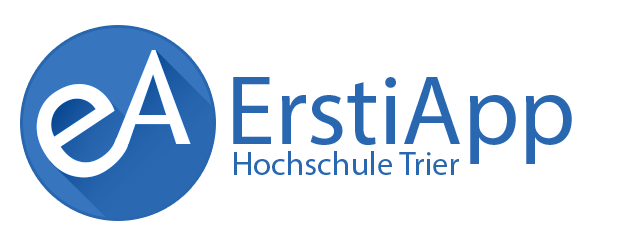
<style>
.page{position:relative;width:630px;height:231px;background:#ffffff}
.page>*{position:absolute;margin:0}
.t1{font:130px "TrebuchetMS";color:#ffffff}
.t2{font:99.2px "MyriadPro-Regular";color:#2968b0}
.t3{font:172px "TrebuchetMS";color:#ffffff}
.t4{font:33.1px "MyriadPro-Regular";color:#2968b0}
</style>
<div class="page">
<p class="t1" style="left:114px;top:50px;width:77px;height:94px">A</p>
<p class="t2" style="left:233px;top:77px;width:339px;height:87px">ErstiApp</p>
<p class="t3" style="left:36px;top:84px;width:93px;height:94px;rotate:-34deg">e</p>
<p class="t4" style="left:234px;top:151px;width:225px;height:24px">Hochschule Trier</p>
</div>
